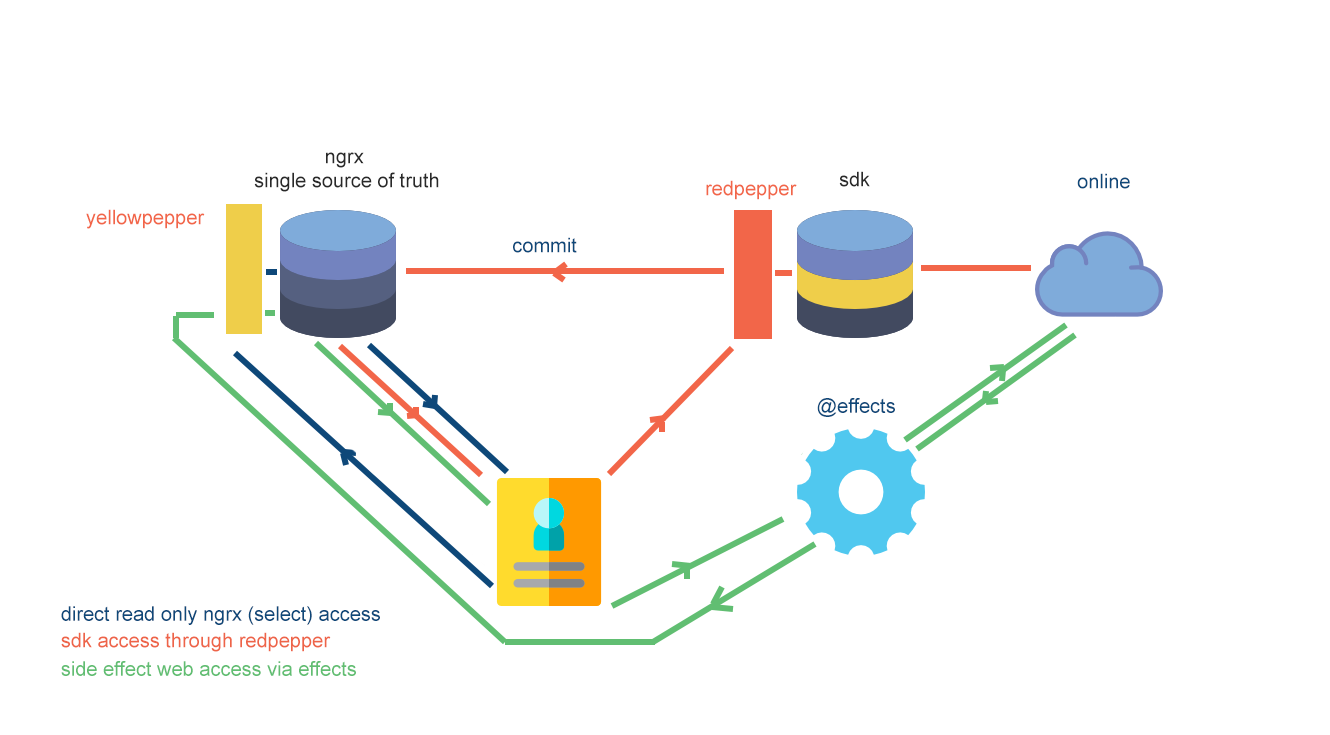
<style>
.page{position:relative;width:1330px;height:735px;background:#ffffff}
.page>*{position:absolute;margin:0}
.t1{font:20px "ArialMT";color:#292929}
.t2{font:20px "ArialMT";color:#0e4879}
.t3{font:20px "ArialMT";color:#f26649}
.t4{font:20px "ArialMT";color:#ee6448}
.t5{font:20px "ArialMT";color:#61be72}
</style>
<div class="page">
<p class="t1" style="left:254px;top:152px;width:185px;height:40px;text-align:center">ngrx<br> single source of truth</p>
<p class="t1" style="left:839px;top:171px;width:31px;height:16px">sdk</p>
<p class="t2" style="left:1077px;top:173px;width:53px;height:16px">online</p>
<p class="t3" style="left:706px;top:180px;width:91px;height:20px">redpepper</p>
<p class="t3" style="left:86px;top:209px;width:119px;height:20px">yellowpepper</p>
<p class="t2" style="left:513px;top:237px;width:64px;height:16px">commit</p>
<p class="t2" style="left:817px;top:398px;width:78px;height:19px">@effects</p>
<p class="t2" style="left:61px;top:606px;width:319px;height:19px">direct read only ngrx (select) access</p>
<p class="t4" style="left:61px;top:632px;width:270px;height:20px">sdk access through redpepper</p>
<p class="t5" style="left:61px;top:661px;width:295px;height:15px">side effect web access via effects</p>
</div>
